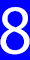
<style>
.page{position:relative;width:30px;height:60px;background:#0000ff}
.page>*{position:absolute;margin:0}
.t1{font:60.7px "KozGoPr6N-Regular";color:#ffffff}
</style>
<div class="page">
<p class="t1" style="left:0px;top:7px;width:30px;height:48px">8</p>
</div>
